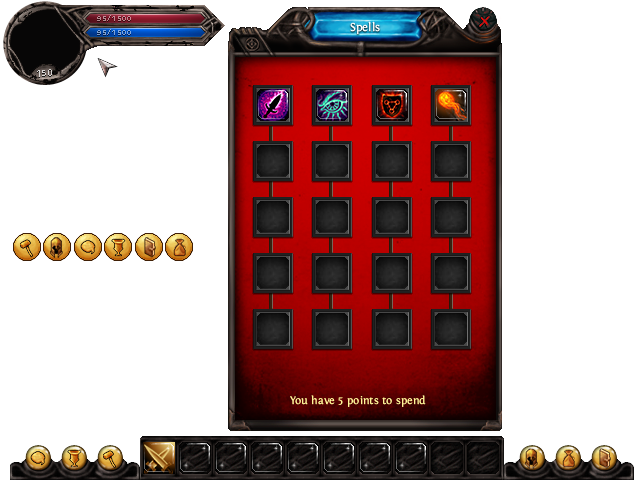
<style>
.page{position:relative;width:640px;height:480px;background:#ffffff}
.page>*{position:absolute;margin:0}
.t1{font:8px "TitilliumText15L-800wt";letter-spacing:0.1em;color:#bd8b93}
.t2{font:8px "TitilliumText15L-800wt";letter-spacing:0.1em;color:#80a4d8}
.t3{font:12px "Fontin-Regular";color:#ffffff}
.t4{font:10px "TitilliumText15L-1wt";color:#dbd9d8}
.t5{font:11.3px "Fontin-Regular";color:#fff799}
</style>
<div class="page">
<p class="t1" style="left:97px;top:15px;width:34px;height:6px">95/1500</p>
<p class="t2" style="left:97px;top:29px;width:34px;height:6px">95/1500</p>
<p class="t3" style="left:350px;top:21px;width:30px;height:13px">Spells</p>
<p class="t4" style="left:37px;top:69px;width:15px;height:8px">150</p>
<p class="t5" style="left:290px;top:395px;width:136px;height:12px">You have 5 points to spend</p>
</div>
